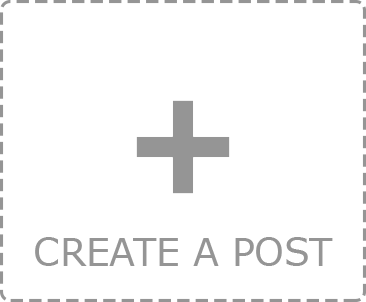
<style>
.page{position:relative;width:366px;height:302px;background:#ffffff}
.page>*{position:absolute;margin:0}
.t1{font:37.5px "Verdana";color:#959595;text-transform:uppercase}
</style>
<div class="page">
<p class="t1" style="left:35px;top:237px;width:298px;height:29px">create a post</p>
</div>
